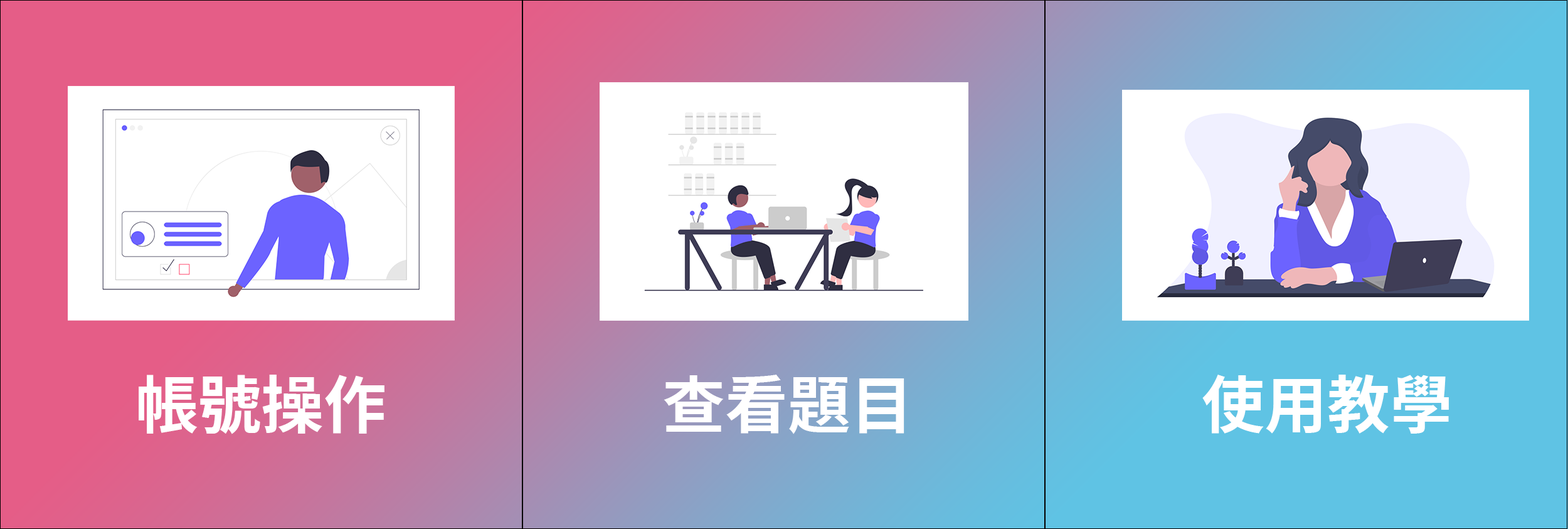
<style>
.page{position:relative;width:1568px;height:529px;background:#ffffff}
.page>*{position:absolute;margin:0}
.t1{font:62.7px "TaipeiSansTCBeta-Bold";color:#ffffff}
</style>
<div class="page">
<p class="t1" style="left:139px;top:374px;width:245px;height:60px">帳號操作</p>
<p class="t1" style="left:664px;top:374px;width:240px;height:60px">查看題目</p>
<p class="t1" style="left:1202px;top:374px;width:247px;height:59px">使用教學</p>
</div>
